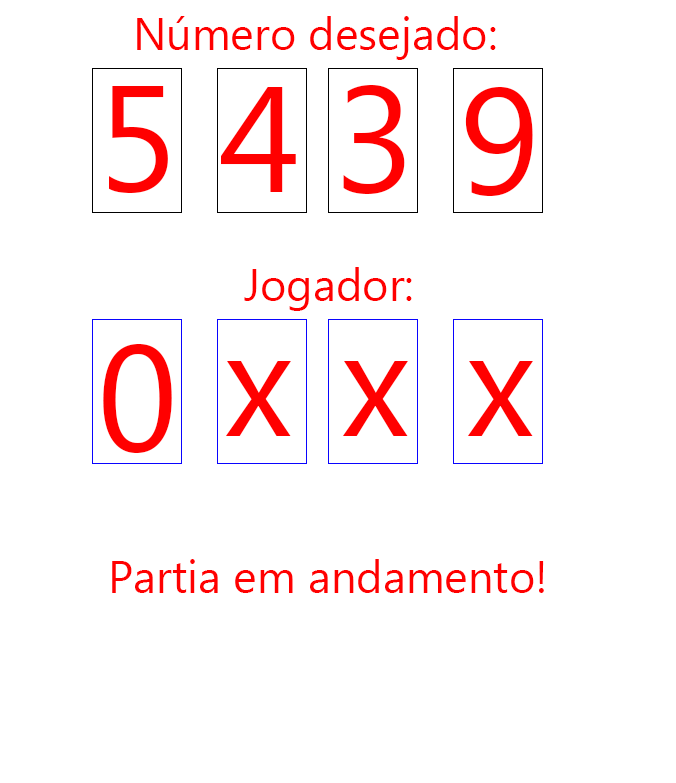
<style>
.page{position:relative;width:676px;height:783px;background:#ffffff}
.page>*{position:absolute;margin:0}
.t1{font:45px "MicrosoftTaiLe";color:#ff0000}
.t2{font:150px "MicrosoftTaiLe";color:#ff0000}
</style>
<div class="page">
<p class="t1" style="left:137px;top:16px;width:359px;height:44px">Número desejado:</p>
<p class="t2" style="left:109px;top:86px;width:59px;height:107px">5</p>
<p class="t2" style="left:221px;top:87px;width:75px;height:105px">4</p>
<p class="t2" style="left:343px;top:85px;width:62px;height:109px">3</p>
<p class="t2" style="left:465px;top:87px;width:68px;height:109px">9</p>
<p class="t1" style="left:244px;top:267px;width:168px;height:44px">Jogador:</p>
<p class="t2" style="left:103px;top:344px;width:69px;height:109px">0</p>
<p class="t2" style="left:225px;top:361px;width:66px;height:75px">x</p>
<p class="t2" style="left:342px;top:361px;width:66px;height:75px">x</p>
<p class="t2" style="left:467px;top:361px;width:66px;height:75px">x</p>
<p class="t1" style="left:112px;top:559px;width:432px;height:34px">Partia em andamento!</p>
</div>
